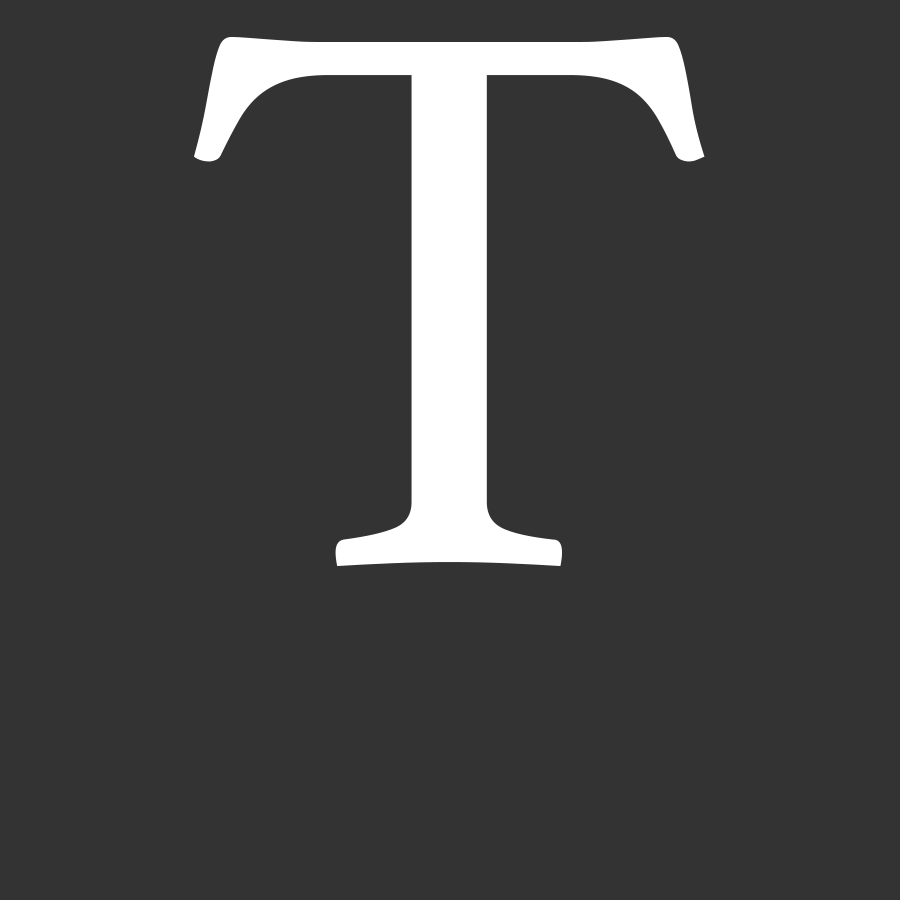
<style>
.page{position:relative;width:900px;height:900px;background:#333333}
.page>*{position:absolute;margin:0}
.t1{font:800px "Athelas-Regular";color:#ffffff}
</style>
<div class="page">
<p class="t1" style="left:193px;top:37px;width:512px;height:529px">T</p>
</div>
